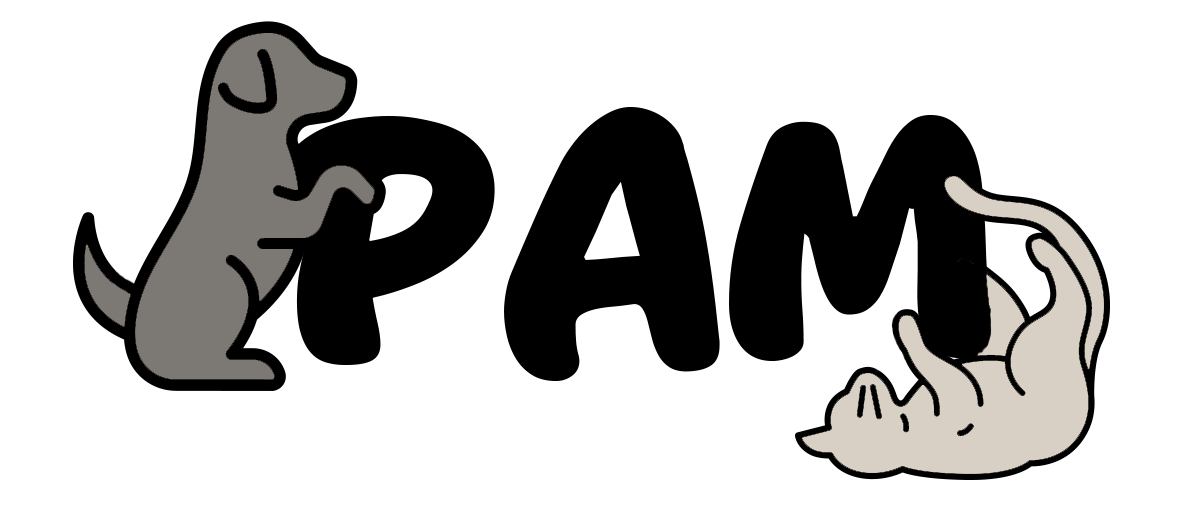
<style>
.page{position:relative;width:1200px;height:520px;background:#ffffff}
.page>*{position:absolute;margin:0}
.t1{font:322.4px "Biscuit-Glitch";color:#000000}
</style>
<div class="page">
<p class="t1" style="left:281px;top:107px;width:711px;height:274px">PAM</p>
</div>
